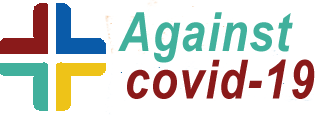
<style>
.page{position:relative;width:315px;height:115px;background:#ffffff}
.page>*{position:absolute;margin:0}
.t1{font:54.2px "ArialNarrow-BoldItalic";letter-spacing:0.025em;color:#41b09c}
.t2{font:54.2px "ArialNarrow-BoldItalic";letter-spacing:0.025em;color:#8a1a1a}
</style>
<div class="page">
<p class="t1" style="left:118px;top:12px;width:175px;height:51px">Against</p>
<p class="t2" style="left:127px;top:59px;width:188px;height:40px">covid-19</p>
</div>
